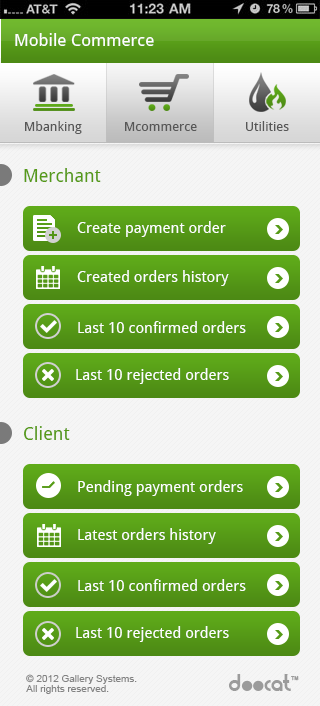
<style>
.page{position:relative;width:320px;height:706px;background:#f5f5f5}
.page>*{position:absolute;margin:0}
.t1{font:17px "DroidSans";color:#ffffff}
.t2{font:18px "DroidSans";color:#569a17}
.t3{font:15px "DroidSans";color:#ffffff}
.t4{font:10px/10px "ArialMT";color:#838383}
</style>
<div class="page">
<p class="t1" style="left:15px;top:33px;width:139px;height:13px">Mobile Commerce</p>
<p class="t2" style="left:24px;top:168px;width:77px;height:14px">Merchant</p>
<p class="t3" style="left:77px;top:221px;width:149px;height:16px">Create payment order</p>
<p class="t3" style="left:77px;top:270px;width:152px;height:16px">Created orders history</p>
<p class="t3" style="left:78px;top:321px;width:168px;height:12px">Last 10 confirmed orders</p>
<p class="t3" style="left:76px;top:368px;width:153px;height:16px">Last 10 rejected orders</p>
<p class="t2" style="left:24px;top:426px;width:46px;height:14px">Client</p>
<p class="t3" style="left:78px;top:480px;width:165px;height:16px">Pending payment orders</p>
<p class="t3" style="left:78px;top:528px;width:138px;height:16px">Latest orders history</p>
<p class="t3" style="left:78px;top:579px;width:168px;height:12px">Last 10 confirmed orders</p>
<p class="t3" style="left:76px;top:626px;width:153px;height:16px">Last 10 rejected orders</p>
<p class="t4" style="left:26px;top:674px;width:111px;height:20px">© 2012 Gallery Systems. <br>All rights reserved.</p>
</div>
